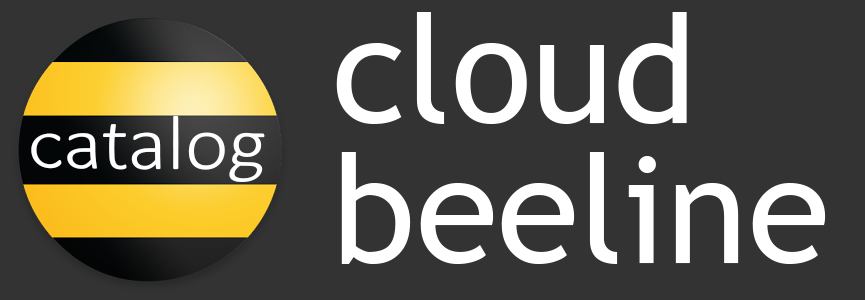
<style>
.page{position:relative;width:865px;height:300px;background:#333333}
.page>*{position:absolute;margin:0}
.t1{font:150px "TrebuchetMS";color:#ffffff}
.t2{font:71.2px "Calibri-Light";color:#ffffff;scale:1.07 1}
</style>
<div class="page">
<p class="t1" style="left:336px;top:12px;width:351px;height:112px">cloud</p>
<p class="t2" style="left:31px;top:115px;width:234px;height:67px">catalog</p>
<p class="t1" style="left:341px;top:152px;width:485px;height:112px">beeline</p>
</div>
